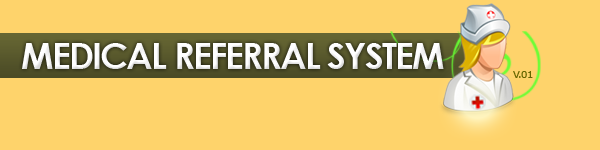
<style>
.page{position:relative;width:600px;height:150px;background:#fed36b}
.page>*{position:absolute;margin:0}
.t1{font:36px "CenturyGothic-Bold";letter-spacing:-0.05em;color:#ffffff}
.t2{font:10px "Verdana";letter-spacing:-0.05em;color:#666600}
</style>
<div class="page">
<p class="t1" style="left:22px;top:43px;width:422px;height:26px">MEDICAL REFERRAL SYSTEM</p>
<p class="t2" style="left:513px;top:71px;width:20px;height:7px">V.01</p>
</div>
